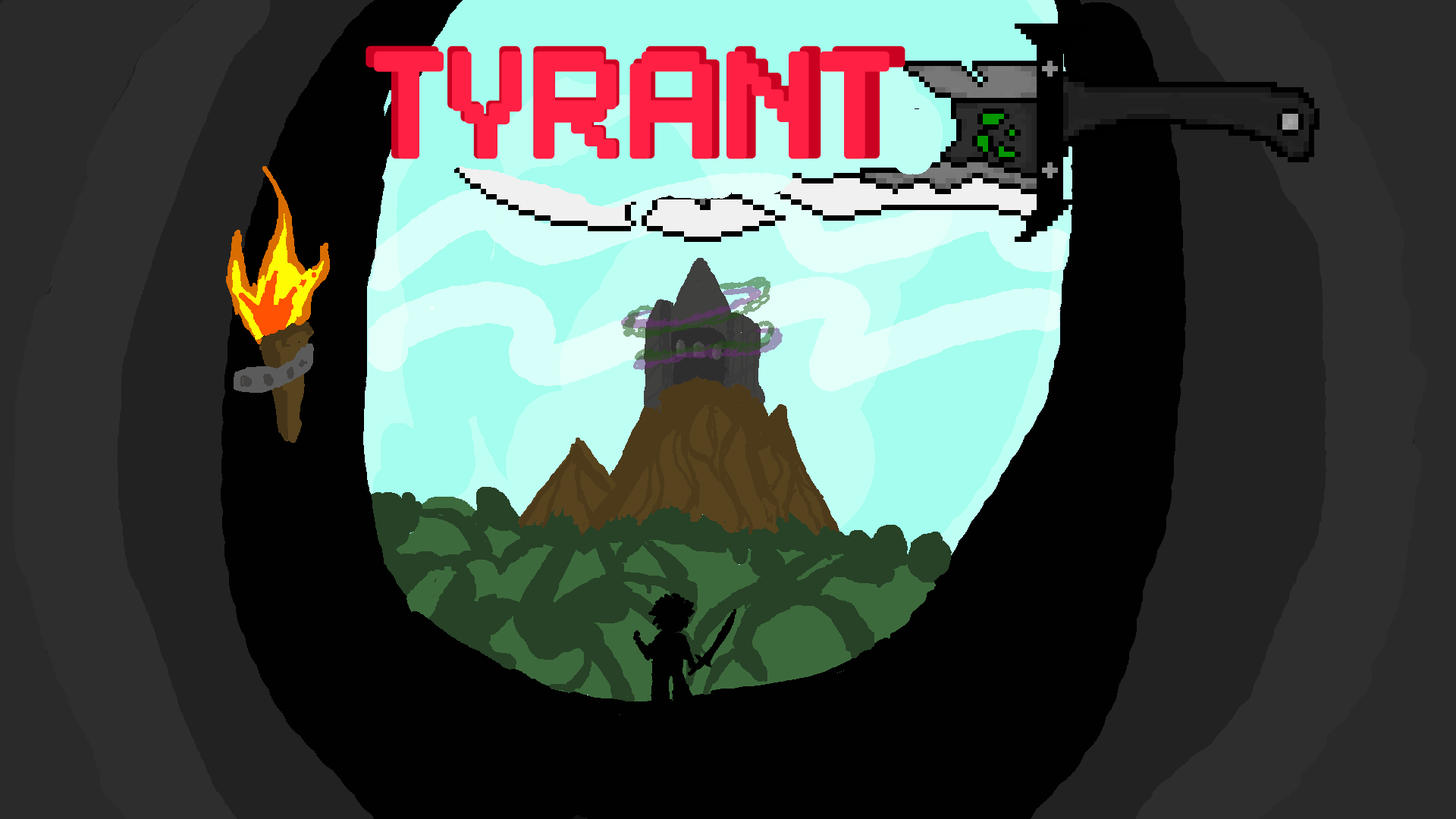
<style>
.page{position:relative;width:1456px;height:819px;background:#010101}
.page>*{position:absolute;margin:0}
.t1{font:142.2px "PixelSplitter-Bold";color:#ff2044}
.t2{font:135.9px "PixelSplitter-Bold";color:#ff2044}
</style>
<div class="page">
<p class="t1" style="left:366px;top:45px;width:539px;height:113px">TYRANT</p>
<p class="t2" style="left:374px;top:51px;width:516px;height:108px">TYRANT</p>
</div>
